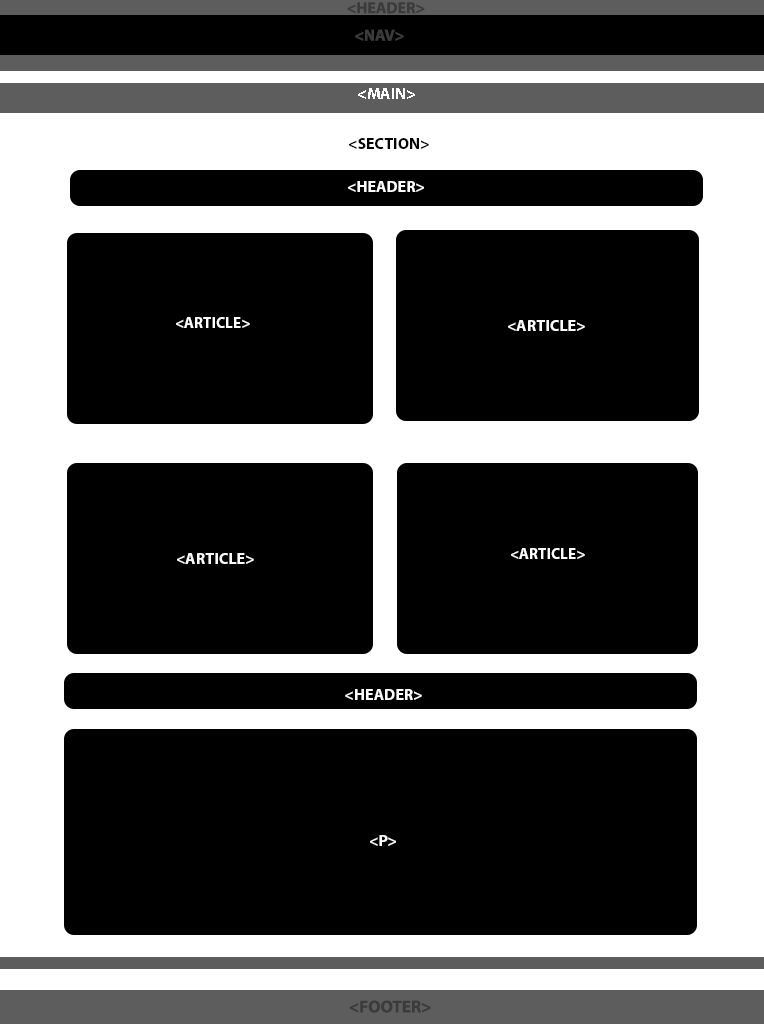
<style>
.page{position:relative;width:764px;height:1024px;background:#000000}
.page>*{position:absolute;margin:0}
.t1{font:16px "MyriadPro-Bold";color:#3b3b3b}
.t2{font:16px "MyriadPro-Bold";color:#ffffff}
.t3{font:16px "MyriadPro-Bold";color:#030303}
.t4{font:16px "MyriadPro-Bold";color:#fefefe}
.t5{font:15.4px "MyriadPro-Bold";color:#ffffff}
.t6{font:16px "MyriadPro-Bold";color:#fbfbfb}
.t7{font:15.4px "MyriadPro-Bold";color:#fefefe}
.t8{font:17.2px "MyriadPro-Bold";color:#3b3b3b}
</style>
<div class="page">
<p class="t1" style="left:347px;top:2px;width:78px;height:12px">&lt;HEADER&gt;</p>
<p class="t1" style="left:355px;top:29px;width:49px;height:12px">&lt;NAV&gt;</p>
<p class="t2" style="left:358px;top:88px;width:57px;height:11px">&lt;MAIN&gt;</p>
<p class="t3" style="left:349px;top:138px;width:80px;height:11px">&lt;SECTION&gt;</p>
<p class="t4" style="left:348px;top:181px;width:76px;height:11px">&lt;HEADER&gt;</p>
<p class="t5" style="left:176px;top:317px;width:74px;height:11px">&lt;ARTICLE&gt;</p>
<p class="t4" style="left:508px;top:320px;width:77px;height:11px">&lt;ARTICLE&gt;</p>
<p class="t6" style="left:177px;top:553px;width:77px;height:11px">&lt;ARTICLE&gt;</p>
<p class="t7" style="left:511px;top:548px;width:74px;height:11px">&lt;ARTICLE&gt;</p>
<p class="t2" style="left:345px;top:689px;width:77px;height:11px">&lt;HEADER&gt;</p>
<p class="t6" style="left:370px;top:835px;width:26px;height:11px">&lt;P&gt;</p>
<p class="t8" style="left:349px;top:1000px;width:82px;height:13px">&lt;FOOTER&gt;</p>
</div>
